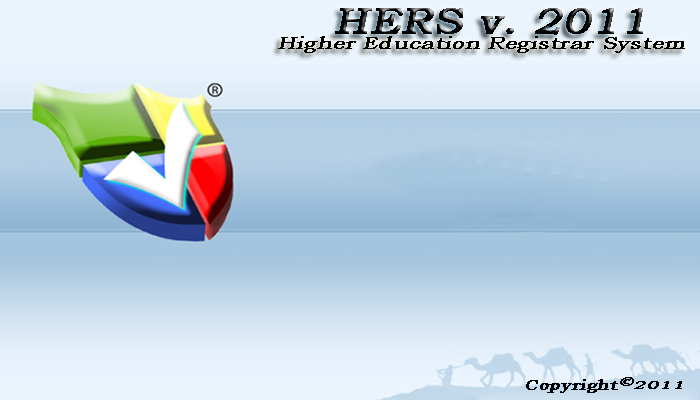
<style>
.page{position:relative;width:700px;height:400px}
.page>*{position:absolute;margin:0}
.t1{font:37.3px "BookmanOldStyle";color:#000000;font-weight:bold;font-style:italic;scale:1.14 1}
.t2{font:16.6px "BookmanOldStyle";color:#000000;font-weight:bold;font-style:italic;scale:1.3 1}
.t3{font:13.2px "BookmanOldStyle";color:#000000;font-weight:bold;font-style:italic;scale:1.45 1}
.t4{font:14.9px "BookmanOldStyle";color:#000000;font-weight:bold;font-style:italic;scale:1.18 1}
.t5{font:11.9px "BookmanOldStyle";color:#000000;font-weight:bold;font-style:italic;scale:1.6 1}
</style>
<div class="page">
<p class="t1" style="left:335px;top:8px;width:308px;height:27px">HERS v. 2011</p>
<p class="t2" style="left:278px;top:36px;width:407px;height:17px">Higher Education Registrar System</p>
<p class="t3" style="left:620px;top:377px;width:14px;height:9px">©</p>
<p class="t4" style="left:526px;top:379px;width:92px;height:14px">Copyright</p>
<p class="t5" style="left:634px;top:381px;width:48px;height:8px">2011</p>
</div>
